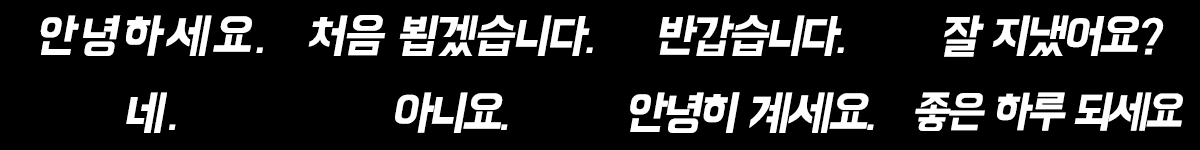
<style>
.page{position:relative;width:1200px;height:150px;background:#000000}
.page>*{position:absolute;margin:0}
.t1{font:48px "BMHANNA11yrsold";letter-spacing:0.06em;color:#ffffff;font-style:italic}
.t2{font:48px "BMHANNA11yrsold";letter-spacing:-0.04em;color:#ffffff;font-style:italic}
.t3{font:48px "BMHANNA11yrsold";letter-spacing:-0.06em;color:#ffffff;font-style:italic}
.t4{font:45px "BMHANNA11yrsold";letter-spacing:-0.08em;color:#ffffff;font-style:italic}
</style>
<div class="page">
<p class="t1" style="left:40px;top:15px;width:223px;height:41px">안녕하세요.</p>
<p class="t2" style="left:308px;top:15px;width:285px;height:41px">처음 뵙겠습니다.</p>
<p class="t3" style="left:659px;top:15px;width:185px;height:41px">반갑습니다.</p>
<p class="t3" style="left:944px;top:15px;width:220px;height:42px">잘 지냈어요?</p>
<p class="t1" style="left:126px;top:92px;width:50px;height:41px">네.</p>
<p class="t3" style="left:395px;top:92px;width:113px;height:41px">아니요.</p>
<p class="t3" style="left:630px;top:92px;width:244px;height:41px">안녕히 계세요.</p>
<p class="t4" style="left:915px;top:92px;width:268px;height:39px">좋은 하루 되세요</p>
</div>
